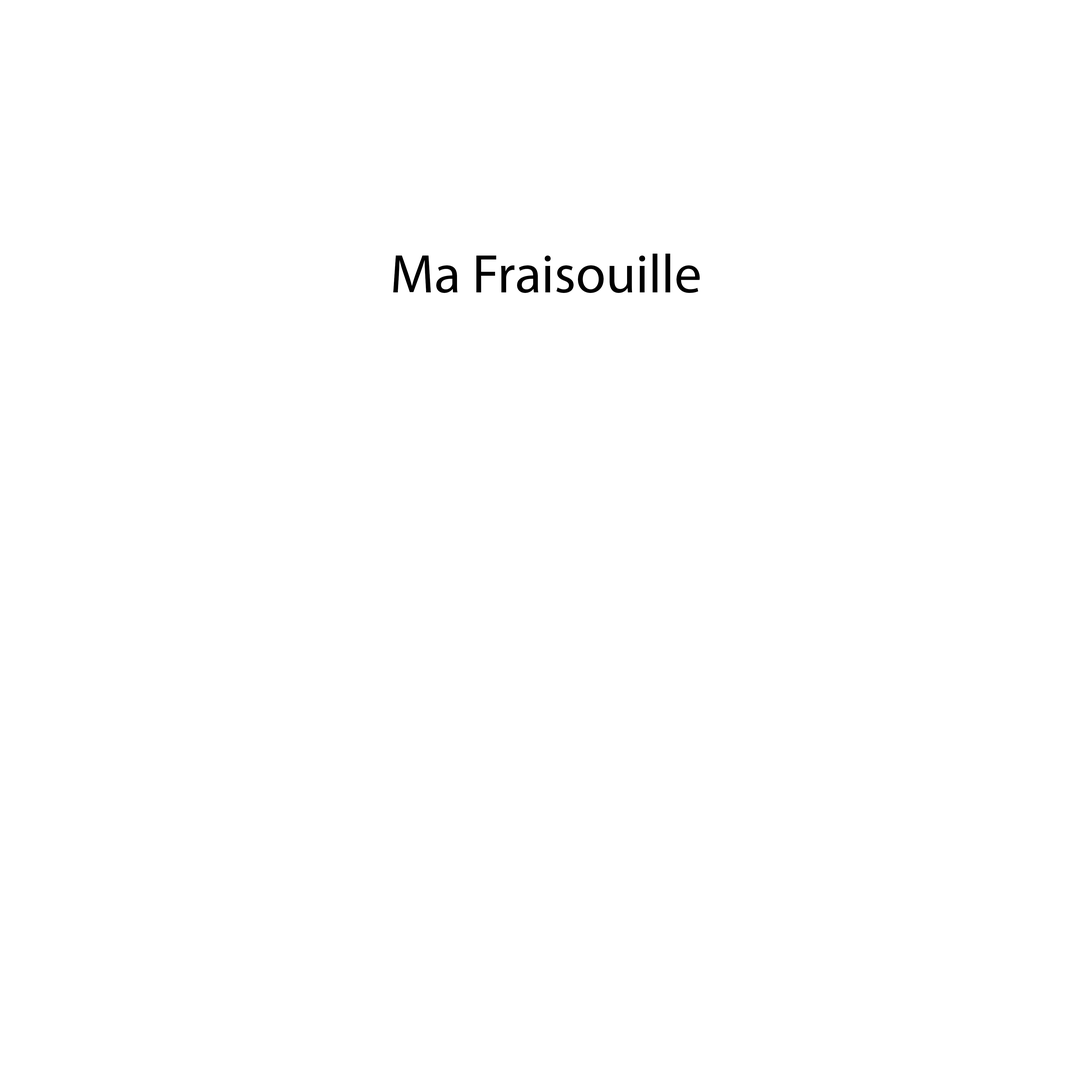
<style>
.page{position:relative;width:1092px;height:1092px;background:#ffffff}
.page>*{position:absolute;margin:0}
.t1{font:54.6px "MyriadPro-Regular";color:#000000}
</style>
<div class="page">
<p class="t1" style="left:393px;top:254px;width:307px;height:39px">Ma Fraisouille</p>
</div>
